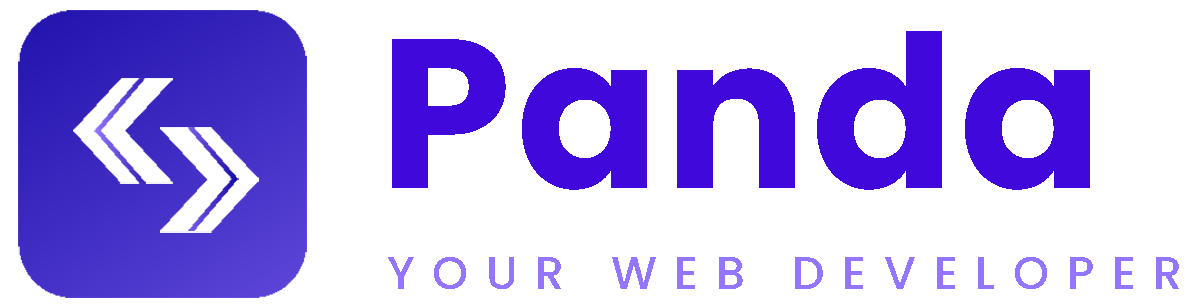
<style>
.page{position:relative;width:1197px;height:308px;background:#ffffff}
.page>*{position:absolute;margin:0}
.t1{font:212px "Poppins-Bold";letter-spacing:0.02em;color:#4008da}
.t2{font:45.9px "Poppins-Medium";letter-spacing:0.385em;color:#9375ff;text-transform:uppercase}
</style>
<div class="page">
<p class="t1" style="left:392px;top:31px;width:698px;height:159px">Panda</p>
<p class="t2" style="left:388px;top:257px;width:791px;height:32px">your web developer</p>
</div>
